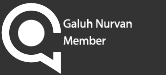
<style>
.page{position:relative;width:166px;height:75px;background:#333333}
.page>*{position:absolute;margin:0}
.t1{font:12px "MyriadPro-Regular";color:#ffffff}
</style>
<div class="page">
<p class="t1" style="left:63px;top:19px;width:69px;height:9px">Galuh Nurvan Saputra</p>
<p class="t1" style="left:63px;top:36px;width:43px;height:9px">Member</p>
</div>
